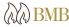
<style>
.page{position:relative;width:69px;height:27px;background:#ffffff}
.page>*{position:absolute;margin:0}
.t1{font:18px "RyuminPro-ExBold";letter-spacing:-0.08em;color:#ae9442;scale:0.9 1}
</style>
<div class="page">
<p class="t1" style="left:33px;top:7px;width:36px;height:14px">BMB</p>
</div>
